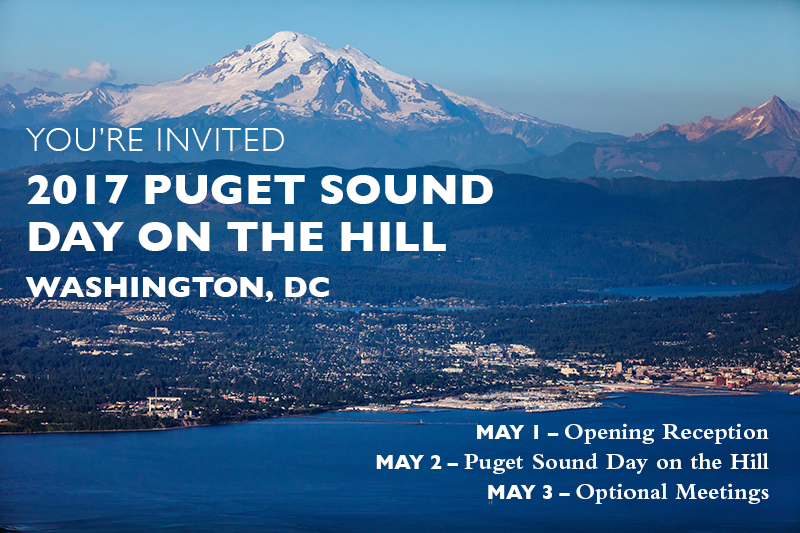
<style>
.page{position:relative;width:800px;height:533px}
.page>*{position:absolute;margin:0}
.t1{font:43.3px/53.3px "GillSans-Bold";color:#ffffff;text-transform:uppercase}
.t2{font:33.3px/53.3px "GillSans-Light";letter-spacing:0.05em;color:#ffffff;text-transform:uppercase}
.t3{font:43.3px/46.7px "GillSans-Bold";color:#ffffff;text-transform:uppercase}
.t4{font:30px "GillSans-Bold";color:#ffffff;text-transform:uppercase}
.t5{font:23.3px/30px "BemboStd-Bold";color:#ffffff}
.t6{font:20px/30px "GillSans-Bold";color:#ffffff;text-transform:uppercase}
</style>
<div class="page">
<p class="t1" style="left:26px;top:128px;width:467px;height:123px"><span class="t2">you’re invited<br></span>2017 Puget Sound<br><span class="t3">Day on The Hill</span></p>
<p class="t4" style="left:25px;top:277px;width:304px;height:25px">washington, DC</p>
<p class="t5" style="left:376px;top:423px;width:393px;height:81px;text-align:right"><span class="t6">May 1 – </span>Opening Reception<br><span class="t6">May 2 – </span>Puget Sound Day on the Hill<br><span class="t6">May 3 – </span>Optional Meetings</p>
</div>
